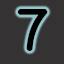
<style>
.page{position:relative;width:64px;height:64px;background:#343232}
.page>*{position:absolute;margin:0}
.t1{font:60px "Neon80s";color:#000000}
</style>
<div class="page">
<p class="t1" style="left:18px;top:9px;width:30px;height:42px">7</p>
</div>
